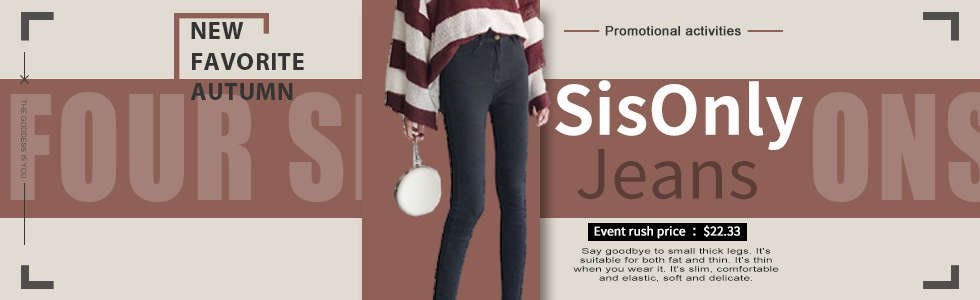
<style>
.page{position:relative;width:980px;height:300px;background:#e0dcd1}
.page>*{position:absolute;margin:0}
.t1{font:24.8px/30.4px "MyriadPro-Bold";letter-spacing:0.02em;color:#343434;text-transform:uppercase}
.t2{font:13px "ArialMT";letter-spacing:0.02em;color:#343434;font-weight:bold}
.t3{font:67.4px "SourceHanSansCN-Bold";color:#fdfefd}
.t4{font:7px/32.2px "ArialMT";letter-spacing:0.02em;text-transform:uppercase}
.t5{font:67.4px "SourceHanSansCN-Regular";color:#5a3e37}
.t6{font:11.6px "SourceHanSansCN-Regular";color:#ffffff;font-weight:bold}
.t7{font:8px/9px "ArialMT";letter-spacing:0.02em;color:#181818;scale:1.44 1}
</style>
<div class="page">
<p class="t1" style="left:190px;top:22px;width:114px;height:78px;rotate:-90deg">New <br>favorite<br>autumn</p>
<p class="t2" style="left:605px;top:26px;width:136px;height:10px">Promotional activities</p>
<p class="t3" style="left:555px;top:80px;width:248px;height:70px">SisOnly</p>
<p class="t4" style="left:21px;top:99px;width:6px;height:79px">The goddess is you</p>
<p class="t5" style="left:577px;top:149px;width:180px;height:51px">Jeans</p>
<p class="t6" style="left:594px;top:225px;width:146px;height:14px">Event rush price  ：$22.33</p>
<p class="t7" style="left:573px;top:248px;width:206px;height:34px;text-align:center">Say goodbye to small thick legs. It's suitable for both fat and thin. It's thin when you wear it. It's slim, comfortable and elastic, soft and delicate.</p>
</div>
